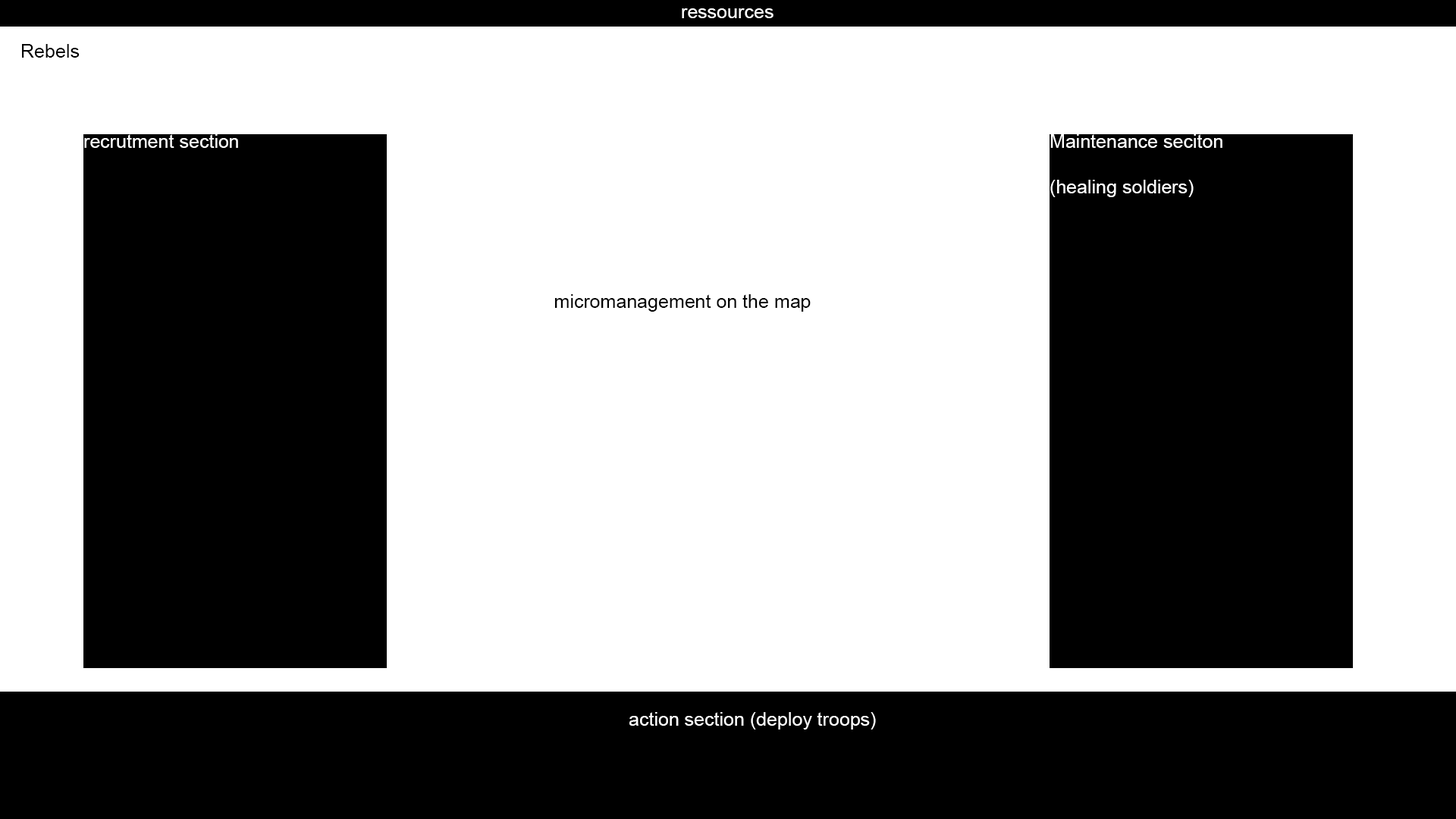
<style>
.page{position:relative;width:1456px;height:819px;background:#ffffff}
.page>*{position:absolute;margin:0}
.t1{font:19px "ArialMT";color:#ffffff}
.t2{font:19px "ArialMT";color:#000000}
</style>
<div class="page">
<p class="t1" style="left:682px;top:8px;width:91px;height:10px">ressources</p>
<p class="t2" style="left:22px;top:44px;width:58px;height:14px">Rebels</p>
<p class="t1" style="left:84px;top:134px;width:154px;height:14px">recrutment section</p>
<p class="t1" style="left:1050px;top:134px;width:172px;height:63px">Maintenance seciton<br><br>(healing soldiers)</p>
<p class="t2" style="left:555px;top:294px;width:256px;height:18px">micromanagement on the map</p>
<p class="t1" style="left:629px;top:712px;width:247px;height:18px">action section (deploy troops)</p>
</div>
